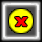
<style>
.page{position:relative;width:42px;height:42px}
.page>*{position:absolute;margin:0}
.t1{font:12.6px "Arial-Black";letter-spacing:-0.075em;color:#ff0000;scale:1.25 1}
</style>
<div class="page">
<p class="t1" style="left:15px;top:17px;width:13px;height:10px;rotate:-180deg">X</p>
</div>
